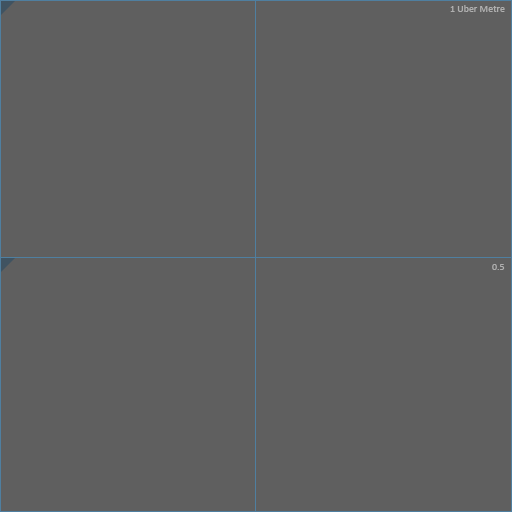
<style>
.page{position:relative;width:512px;height:512px;background:#5f5f5f}
.page>*{position:absolute;margin:0}
.t1{font:10px "Calibri";color:#afafaf}
</style>
<div class="page">
<p class="t1" style="left:450px;top:5px;width:55px;height:7px">1 Uber Metre</p>
<p class="t1" style="left:492px;top:264px;width:13px;height:6px">0.5</p>
</div>
